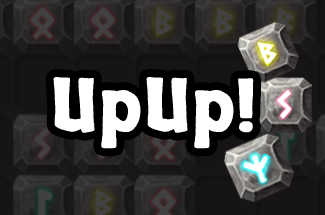
<style>
.page{position:relative;width:325px;height:215px}
.page>*{position:absolute;margin:0}
.t1{font:72px "Skranji";letter-spacing:0.01em;color:#ffffff;font-weight:bold}
</style>
<div class="page">
<p class="t1" style="left:53px;top:77px;width:201px;height:72px">UpUp!</p>
</div>
